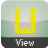
<style>
.page{position:relative;width:48px;height:48px}
.page>*{position:absolute;margin:0}
.t1{font:48px "Astronaut";color:#e8e500}
.t2{font:9px "Small Fonts";color:#f3f3f3}
</style>
<div class="page">
<p class="t1" style="left:14px;top:7px;width:22px;height:27px">V</p>
<p class="t2" style="left:15px;top:39px;width:19px;height:7px">View</p>
</div>
